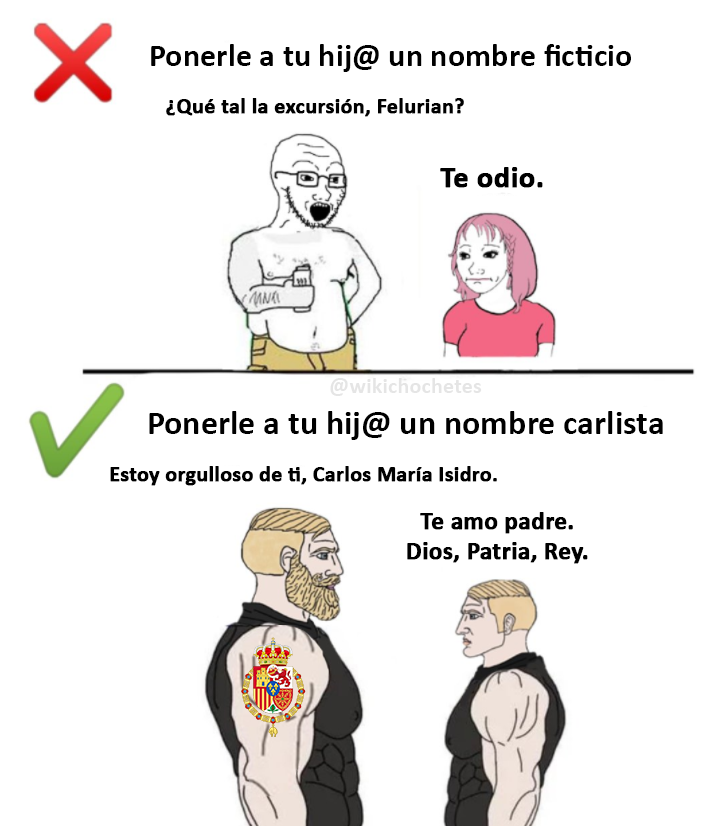
<style>
.page{position:relative;width:722px;height:826px;background:#ffffff}
.page>*{position:absolute;margin:0}
.t1{font:32.3px "Calibri-Bold";color:#000000}
.t2{font:21.7px "Calibri-Bold";color:#000000;font-weight:bold}
.t3{font:30px "Calibri-Bold";color:#000000;font-weight:bold}
.t4{font:22.5px "Calibri-Bold";color:#e5e5e5}
.t5{font:34.1px "Calibri-Bold";color:#000000}
.t6{font:21.5px "Calibri-Bold";color:#000000;font-weight:bold}
.t7{font:24.7px "Calibri-Bold";color:#000000;font-weight:bold}
</style>
<div class="page">
<p class="t1" style="left:151px;top:44px;width:480px;height:28px">Ponerle a tu hij@ un nombre ficticio</p>
<p class="t2" style="left:166px;top:98px;width:298px;height:19px">¿Qué tal la excursión, Felurian?</p>
<p class="t3" style="left:440px;top:167px;width:103px;height:21px">Te odio.</p>
<p class="t4" style="left:330px;top:378px;width:152px;height:18px">@wikichochetes</p>
<p class="t5" style="left:149px;top:411px;width:514px;height:29px">Ponerle a tu hij@ un nombre carlista</p>
<p class="t6" style="left:110px;top:466px;width:387px;height:20px">Estoy orgulloso de ti, Carlos María Isidro.</p>
<p class="t7" style="left:407px;top:512px;width:181px;height:52px;text-align:center">Te amo padre.<br>Dios, Patria, Rey.</p>
</div>
